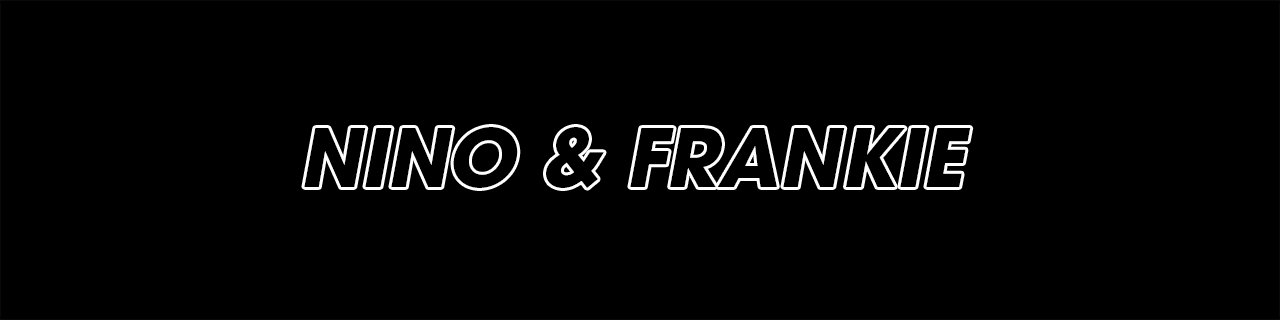
<style>
.page{position:relative;width:1280px;height:320px;background:#000000}
.page>*{position:absolute;margin:0}
.t1{font:80px "ITCAvantGardePro-BoldObl";color:#000000}
</style>
<div class="page">
<p class="t1" style="left:304px;top:127px;width:667px;height:61px">NINO &amp; FRANKIE</p>
</div>
